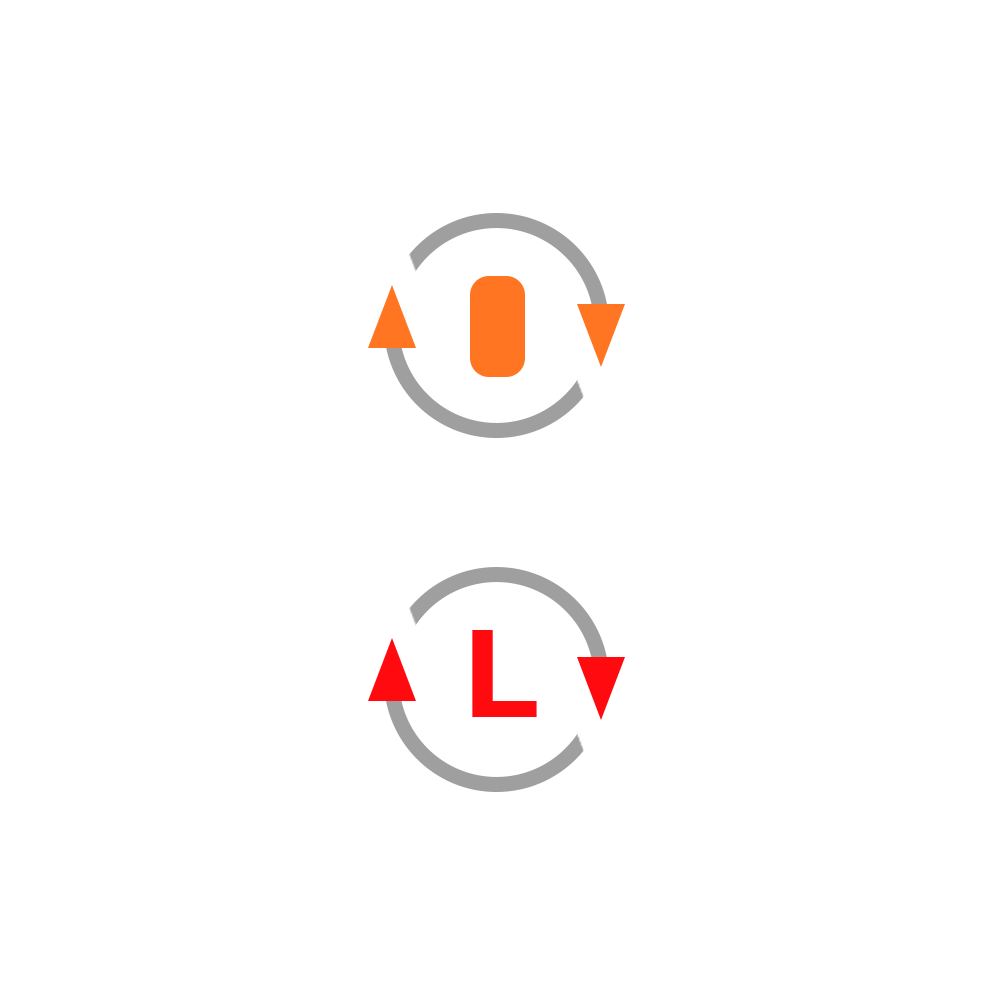
<style>
.page{position:relative;width:1000px;height:1000px;background:#ffffff}
.page>*{position:absolute;margin:0}
.t1{font:125px "Montserrat-Bold";color:#fe0a0f}
</style>
<div class="page">
<p class="t1" style="left:472px;top:630px;width:65px;height:87px">L</p>
</div>
